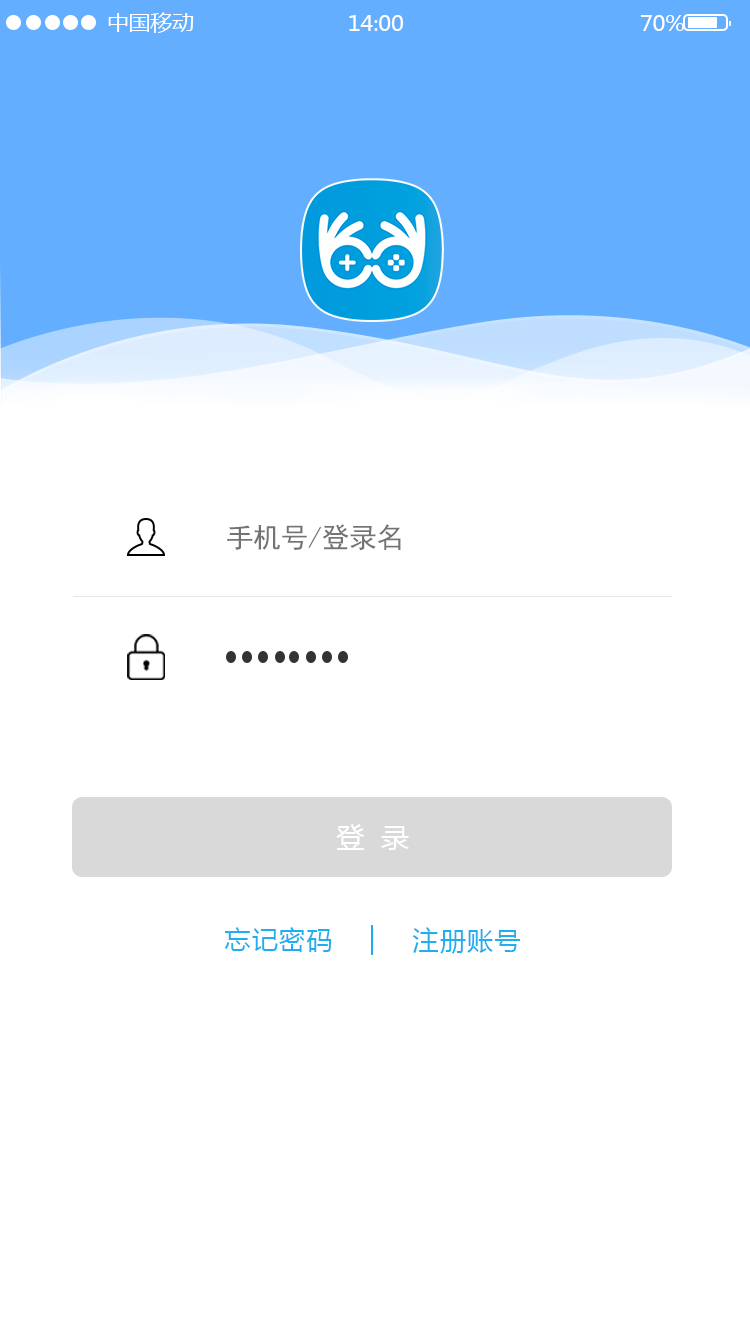
<style>
.page{position:relative;width:750px;height:1334px;background:#ffffff}
.page>*{position:absolute;margin:0}
.t1{font:21.2px "MicrosoftYaHei";color:#ffffff}
.t2{font:28px "SimHei";letter-spacing:-0.02em;color:#737373}
.t3{font:28px "MicrosoftYaHei";color:#ffffff}
.t4{font:26px "MicrosoftYaHei";letter-spacing:0.05em;color:#1faff0}
</style>
<div class="page">
<p class="t1" style="left:108px;top:12px;width:86px;height:21px">中国移动</p>
<p class="t1" style="left:349px;top:15px;width:54px;height:16px">14:00</p>
<p class="t1" style="left:640px;top:15px;width:44px;height:16px">70%</p>
<p class="t2" style="left:227px;top:524px;width:174px;height:27px">手机号/登录名</p>
<p class="t3" style="left:336px;top:824px;width:73px;height:26px">登  录</p>
<p class="t4" style="left:224px;top:927px;width:108px;height:25px">忘记密码</p>
<p class="t4" style="left:412px;top:927px;width:108px;height:27px">注册账号</p>
</div>
